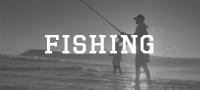
<style>
.page{position:relative;width:200px;height:90px}
.page>*{position:absolute;margin:0}
.t1{font:26px "OctinSportsRg-Regular";letter-spacing:0.06em;color:#ffffff;font-weight:bold}
</style>
<div class="page">
<p class="t1" style="left:45px;top:35px;width:109px;height:19px">Fishing</p>
</div>
